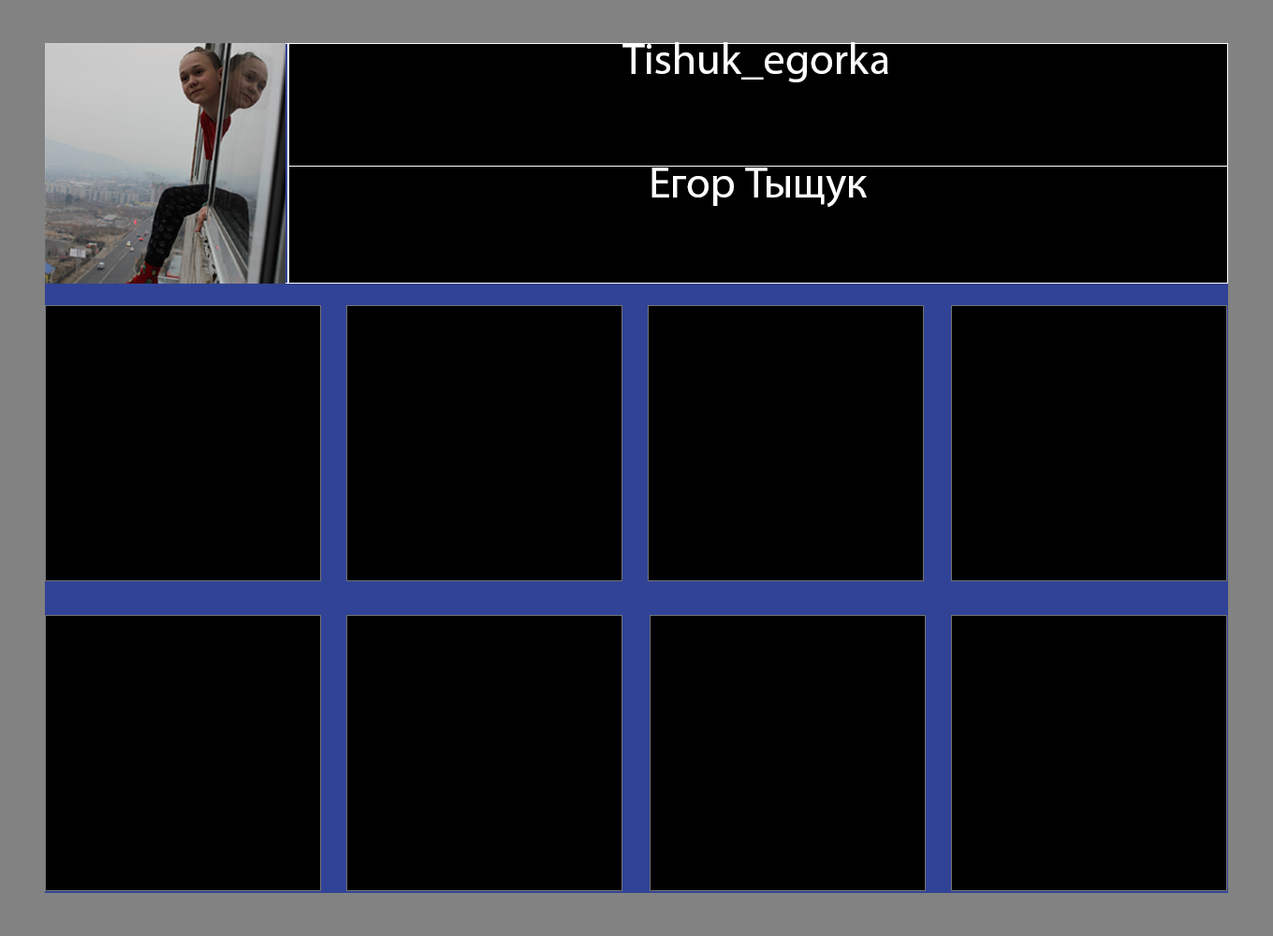
<style>
.page{position:relative;width:1273px;height:936px;background:#000000}
.page>*{position:absolute;margin:0}
.t1{font:44px "MyriadPro-Regular";color:#ffffff}
</style>
<div class="page">
<p class="t1" style="left:623px;top:42px;width:266px;height:40px">Tishuk_egorka</p>
<p class="t1" style="left:652px;top:168px;width:215px;height:40px">Егор Тыщук</p>
</div>
